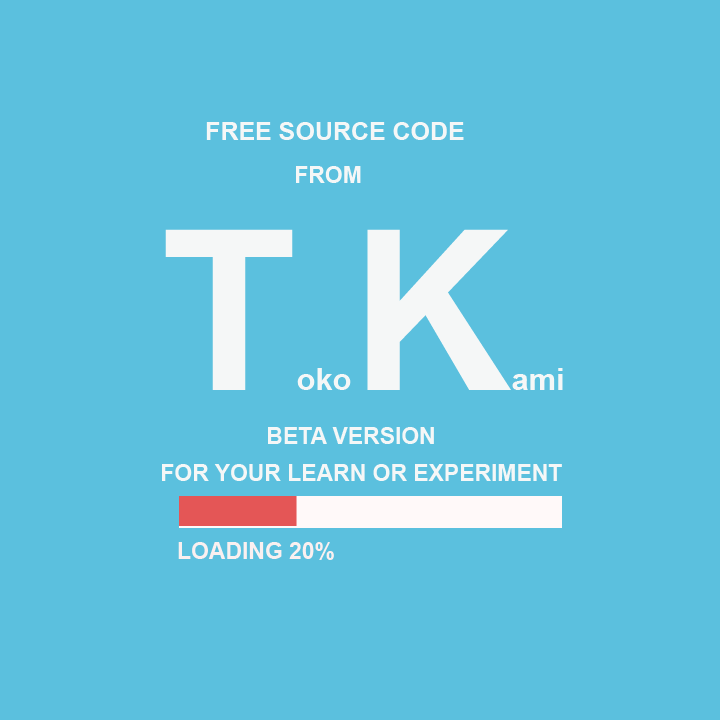
<style>
.page{position:relative;width:720px;height:720px;background:#5bc0de}
.page>*{position:absolute;margin:0}
.t1{font:25px "Arial-BoldMT";color:#f5f7f7}
.t2{font:22.9px "Arial-BoldMT";color:#f5f7f7}
.t3{font:31px "Arial-BoldMT";color:#f5f7f7}
.t4{font:223.1px "Arial-BoldMT";color:#f5f7f7}
.t5{font:22.9px "Arial-BoldMT";color:#faf0f0}
</style>
<div class="page">
<p class="t1" style="left:206px;top:122px;width:258px;height:18px">FREE SOURCE CODE</p>
<p class="t2" style="left:296px;top:166px;width:65px;height:17px">FROM</p>
<p class="t3" style="left:165px;top:229px;width:398px;height:161px"><span class="t4">T</span>oko<span class="t4">K</span>ami</p>
<p class="t2" style="left:268px;top:427px;width:166px;height:17px">BETA VERSION</p>
<p class="t2" style="left:162px;top:464px;width:400px;height:17px">FOR YOUR LEARN OR EXPERIMENT</p>
<p class="t5" style="left:178px;top:542px;width:156px;height:18px">LOADING 20%</p>
</div>
